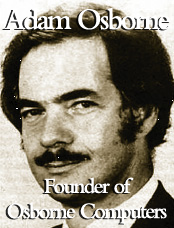
<style>
.page{position:relative;width:174px;height:228px}
.page>*{position:absolute;margin:0}
.t1{font:31.2px "BemboMT-SemiBold";letter-spacing:-0.08em;color:#ffffff;scale:0.95 1}
.t2{font:22.9px/25px "BemboMT-SemiBold";letter-spacing:-0.08em;color:#ffffff;scale:0.95 1}
</style>
<div class="page">
<p class="t1" style="left:4px;top:8px;width:167px;height:22px">Adam Osborne</p>
<p class="t2" style="left:7px;top:177px;width:160px;height:47px;text-align:center">Founder of<br>Osborne Computers</p>
</div>
